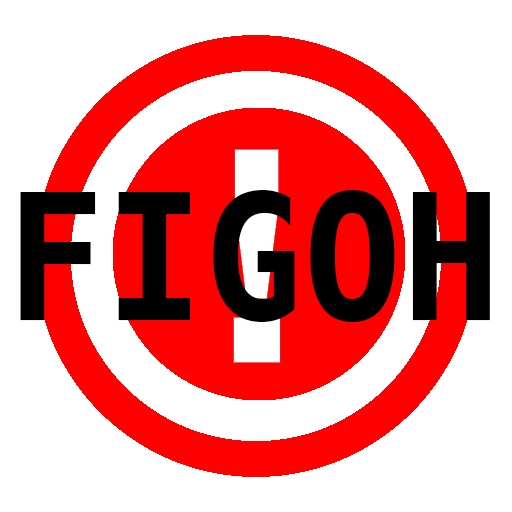
<style>
.page{position:relative;width:512px;height:512px;background:#ffffff}
.page>*{position:absolute;margin:0}
.t1{font:175px "Menlo-Bold";color:#000000;scale:0.94 1}
</style>
<div class="page">
<p class="t1" style="left:20px;top:190px;width:470px;height:132px">FIGOH</p>
</div>
